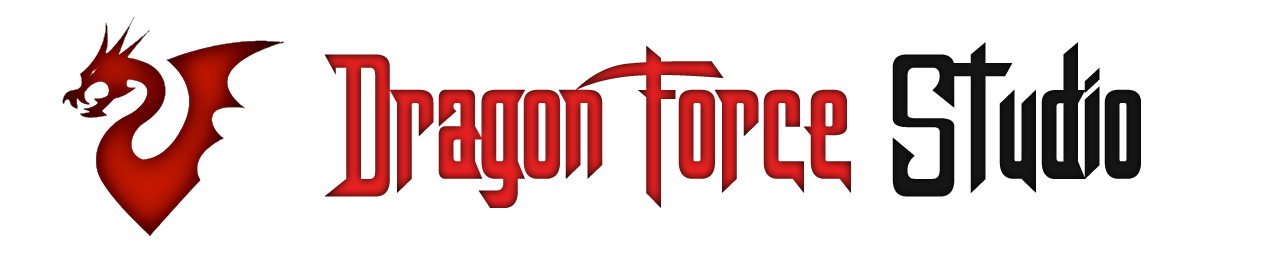
<style>
.page{position:relative;width:1281px;height:256px;background:#ffffff}
.page>*{position:absolute;margin:0}
.t1{font:177.7px "DragonForcE";scale:0.83 1}
</style>
<div class="page">
<p class="t1" style="left:324px;top:42px;width:817px;height:166px">Dragon Force Studio</p>
</div>
